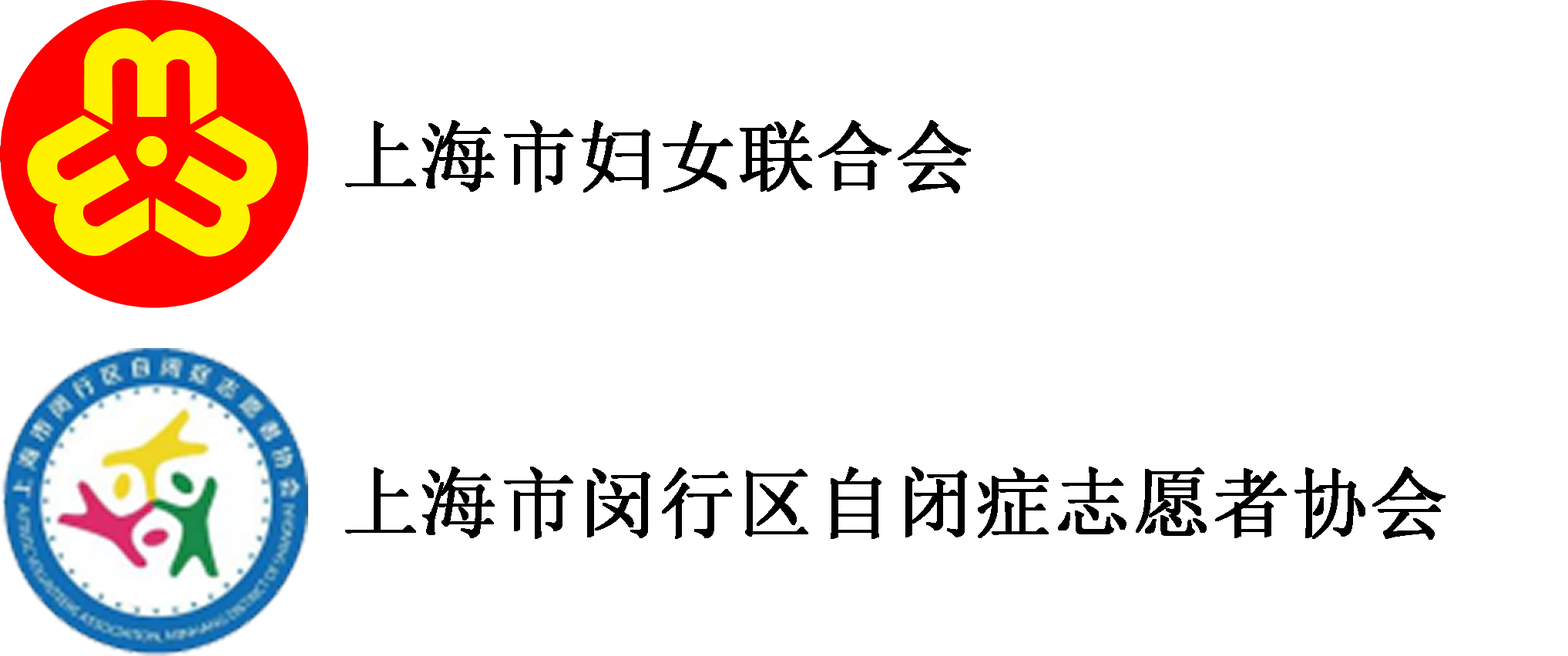
<style>
.page{position:relative;width:1568px;height:656px;background:#ffffff}
.page>*{position:absolute;margin:0}
.t1{font:77.1px "SimSun";color:#000000;font-weight:bold}
</style>
<div class="page">
<p class="t1" style="left:345px;top:120px;width:626px;height:73px">上海市妇女联合会</p>
<p class="t1" style="left:345px;top:467px;width:1100px;height:73px">上海市闵行区自闭症志愿者协会</p>
</div>
